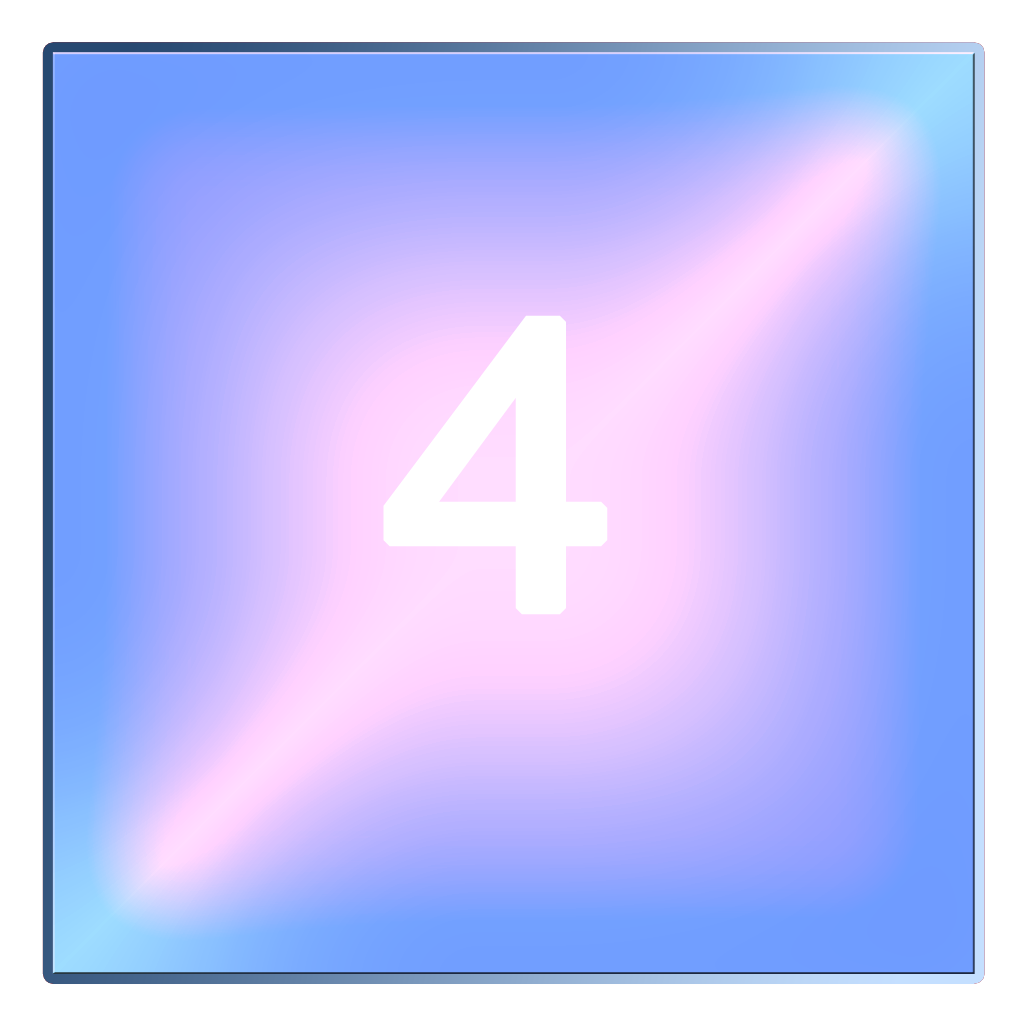
<style>
.page{position:relative;width:1024px;height:1024px}
.page>*{position:absolute;margin:0}
.t1{font:400px "ArialNarrow";color:#ffffff;font-weight:bold;scale:1.3 1}
</style>
<div class="page">
<p class="t1" style="left:383px;top:315px;width:225px;height:300px">4</p>
</div>
